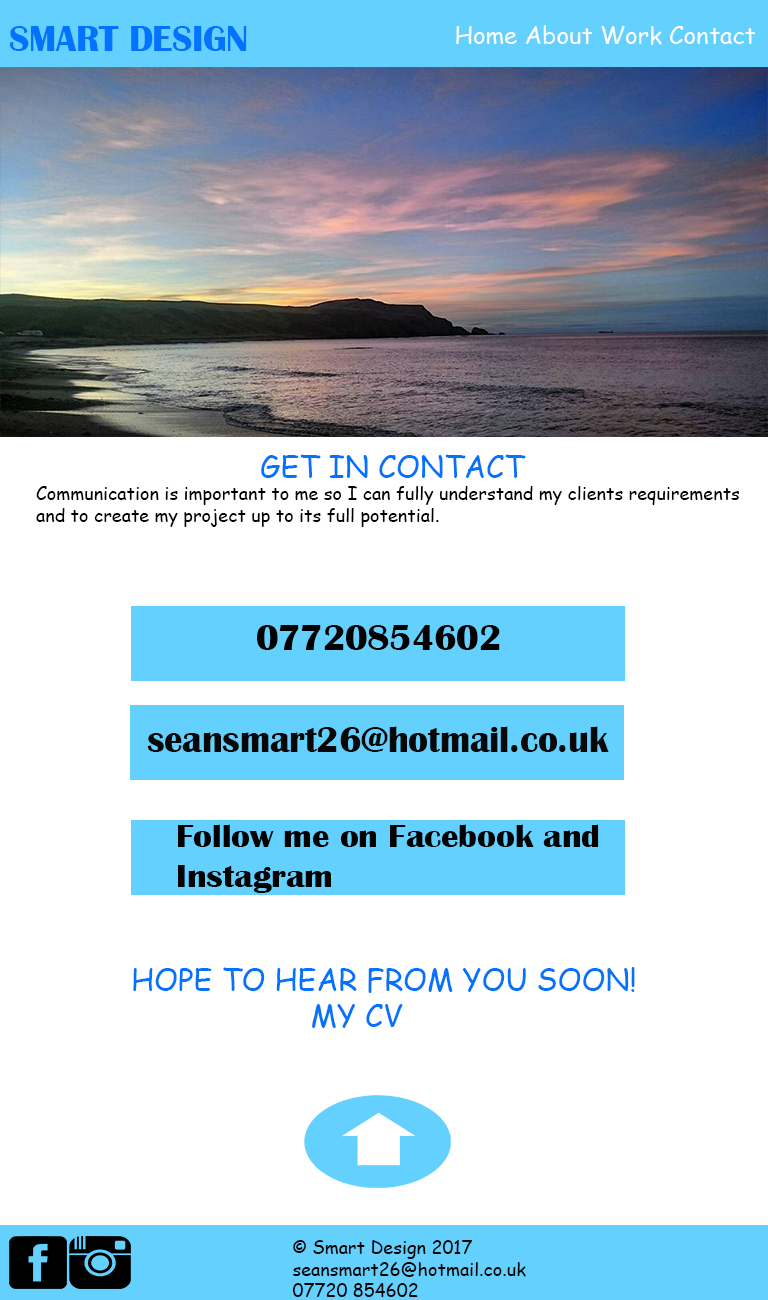
<style>
.page{position:relative;width:768px;height:1300px;background:#ffffff}
.page>*{position:absolute;margin:0}
.t1{font:37.8px "BritannicBold";color:#0373fe;scale:0.96 1}
.t2{font:24px "ComicSansMS";color:#fafcfe}
.t3{font:18px "ComicSansMS";color:#000000}
.t4{font:30px "ComicSansMS";color:#0373fe}
.t5{font:37.8px "BritannicBold";color:#010101;scale:0.96 1}
.t6{font:37.8px "BritannicBold";color:#080808;scale:0.96 1}
.t7{font:33px "BritannicBold";color:#020202;scale:1.05 1}
.t8{font:18px "ComicSansMS";color:#040404}
</style>
<div class="page">
<p class="t1" style="left:10px;top:26px;width:237px;height:25px">SMART DESIGN</p>
<p class="t2" style="left:456px;top:25px;width:300px;height:20px">Home About Work Contact</p>
<p class="t3" style="left:36px;top:454px;width:703px;height:73px"><span class="t4">                         GET IN CONTACT<br></span>Communication is important to me so I can fully understand my clients requirements <br>and to create my project up to its full potential.</p>
<p class="t5" style="left:257px;top:625px;width:243px;height:25px">07720854602</p>
<p class="t6" style="left:147px;top:726px;width:462px;height:26px"><span class="t1">  </span>   seansmart26@hotmail.co.uk</p>
<p class="t7" style="left:178px;top:824px;width:421px;height:69px">Follow me on Facebook and <br>Instagram</p>
<p class="t4" style="left:133px;top:967px;width:502px;height:61px">HOPE TO HEAR FROM YOU SOON!<br>                    MY CV</p>
<p class="t8" style="left:292px;top:1240px;width:234px;height:57px">© Smart Design 2017<br>seansmart26@hotmail.co.uk<br>07720 854602</p>
</div>
